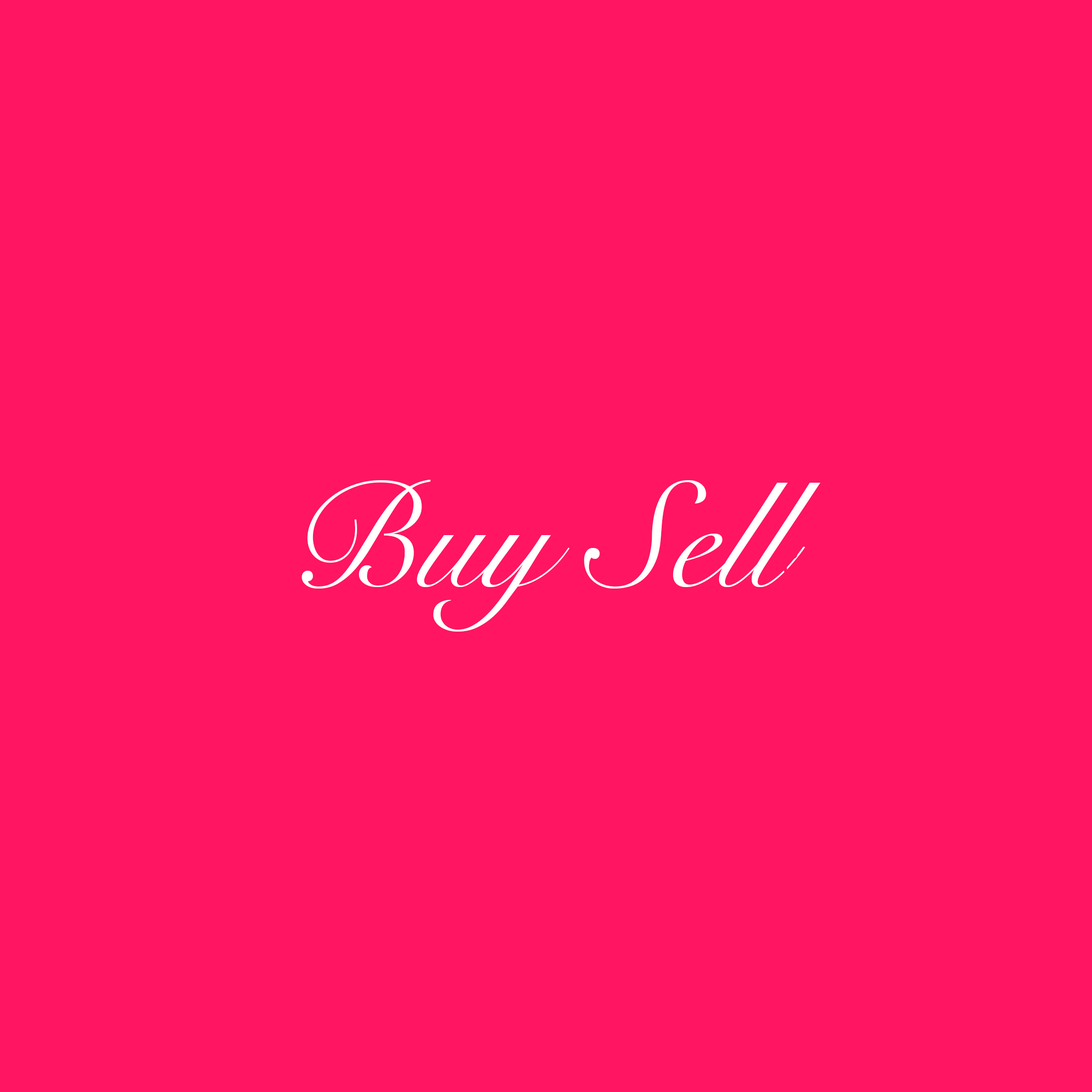
<style>
.page{position:relative;width:1092px;height:1092px;background:#ff1562}
.page>*{position:absolute;margin:0}
.t1{font:148.4px "SnellRoundhand";color:#ffffff}
.t2{font:148.4px "SnellRoundhand";color:#ff1562}
</style>
<div class="page">
<p class="t1" style="left:302px;top:480px;width:716px;height:152px">Buy Sell<span class="t2">Sell</span></p>
</div>
